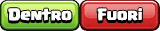
<style>
.page{position:relative;width:160px;height:31px}
.page>*{position:absolute;margin:0}
.t1{font:11.9px "Supercell-Magic";color:#ffffff}
</style>
<div class="page">
<p class="t1" style="left:8px;top:8px;width:64px;height:13px">Dentro</p>
<p class="t1" style="left:97px;top:8px;width:45px;height:13px">Fuori</p>
</div>
